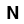
<style>
.page{position:relative;width:24px;height:24px;background:#ffffff}
.page>*{position:absolute;margin:0}
.t1{font:22px "Helvetica-Bold"}
.t2{font:18px "Helvetica-Bold";color:#000000}
</style>
<div class="page">
<p class="t1" style="left:6px;top:4px;width:14px;height:16px">N</p>
<p class="t2" style="left:7px;top:6px;width:12px;height:13px">N</p>
</div>
